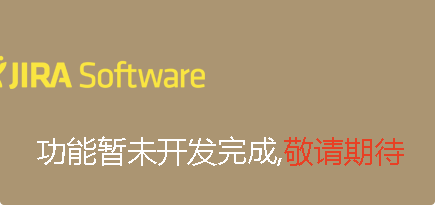
<style>
.page{position:relative;width:435px;height:205px;background:#ab9572}
.page>*{position:absolute;margin:0}
.t1{font:30px "MicrosoftYaHei";color:#ffffff}
.t2{font:30px "MicrosoftYaHei";color:#e84024}
</style>
<div class="page">
<p class="t1" style="left:37px;top:136px;width:367px;height:30px">功能暂未开发完成,<span class="t2">敬请期待</span></p>
</div>
